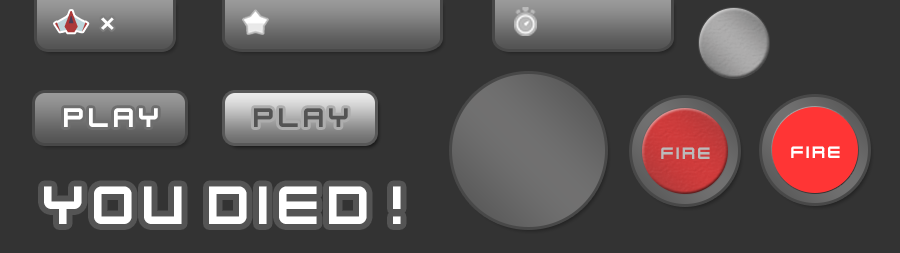
<style>
.page{position:relative;width:900px;height:253px;background:#333333}
.page>*{position:absolute;margin:0}
.t1{font:30px "KenVector-Future";color:#ffffff}
.t2{font:30px "KenVector-Future";color:#545454}
.t3{font:18.4px "KenVector-Future";color:#bbbbbb}
.t4{font:18.4px "KenVector-Future";color:#ffffff}
.t5{font:60px "KenVector-Future";color:#ffffff}
</style>
<div class="page">
<p class="t1" style="left:64px;top:108px;width:94px;height:19px">PLAY</p>
<p class="t2" style="left:254px;top:108px;width:94px;height:19px">PLAY</p>
<p class="t3" style="left:661px;top:147px;width:49px;height:12px">fire</p>
<p class="t4" style="left:791px;top:146px;width:49px;height:12px">fire</p>
<p class="t5" style="left:44px;top:186px;width:357px;height:38px">yOU dIED!</p>
</div>
